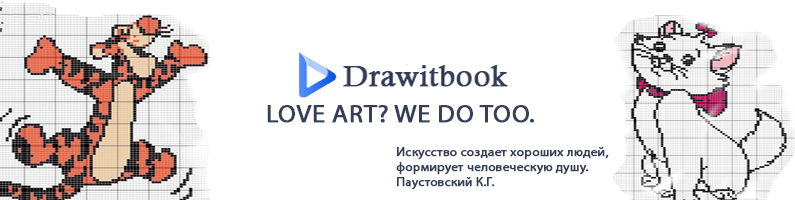
<style>
.page{position:relative;width:795px;height:200px;background:#ffffff}
.page>*{position:absolute;margin:0}
.t1{font:25px "MyriadPro-Regular";color:#363f5a;font-weight:bold;scale:1.05 1}
.t2{font:12.5px "MyriadPro-Regular";color:#363f5a;font-weight:bold;scale:1.05 1}
</style>
<div class="page">
<p class="t1" style="left:267px;top:105px;width:267px;height:18px">LOVE ART? WE DO TOO.</p>
<p class="t2" style="left:396px;top:147px;width:213px;height:43px">Искусство создает хороших людей, <br>формирует человеческую душу.<br>Паустовский К.Г.</p>
</div>
